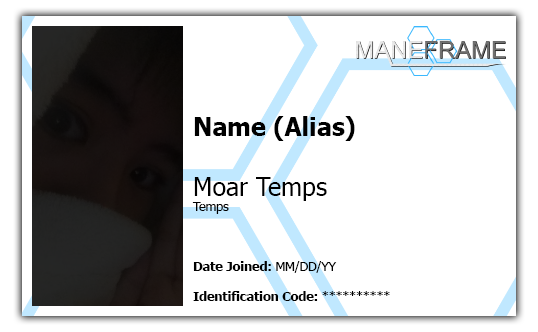
<style>
.page{position:relative;width:538px;height:332px;background:#ffffff}
.page>*{position:absolute;margin:0}
.t1{font:12.5px "Tahoma-Bold";color:#000000}
.t2{font:25px "Tahoma-Bold";color:#000000}
.t3{font:25px "Tahoma";color:#000000}
.t4{font:12.5px "Tahoma";color:#000000}
</style>
<div class="page">
<p class="t1" style="left:192px;top:116px;width:198px;height:185px"><span class="t2">Name (Alias)<br><br></span><span class="t3">Moar Temps<br></span><span class="t4">Temps<br><br><br></span><br>Date Joined: <span class="t4">MM/DD/YY<br></span><br>Identification Code: <span class="t4">**********</span></p>
</div>
